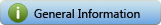
<style>
.page{position:relative;width:161px;height:25px}
.page>*{position:absolute;margin:0}
.t1{font:12px "SegoeUI";color:#010101}
</style>
<div class="page">
<p class="t1" style="left:34px;top:9px;width:106px;height:9px">General Information</p>
</div>
